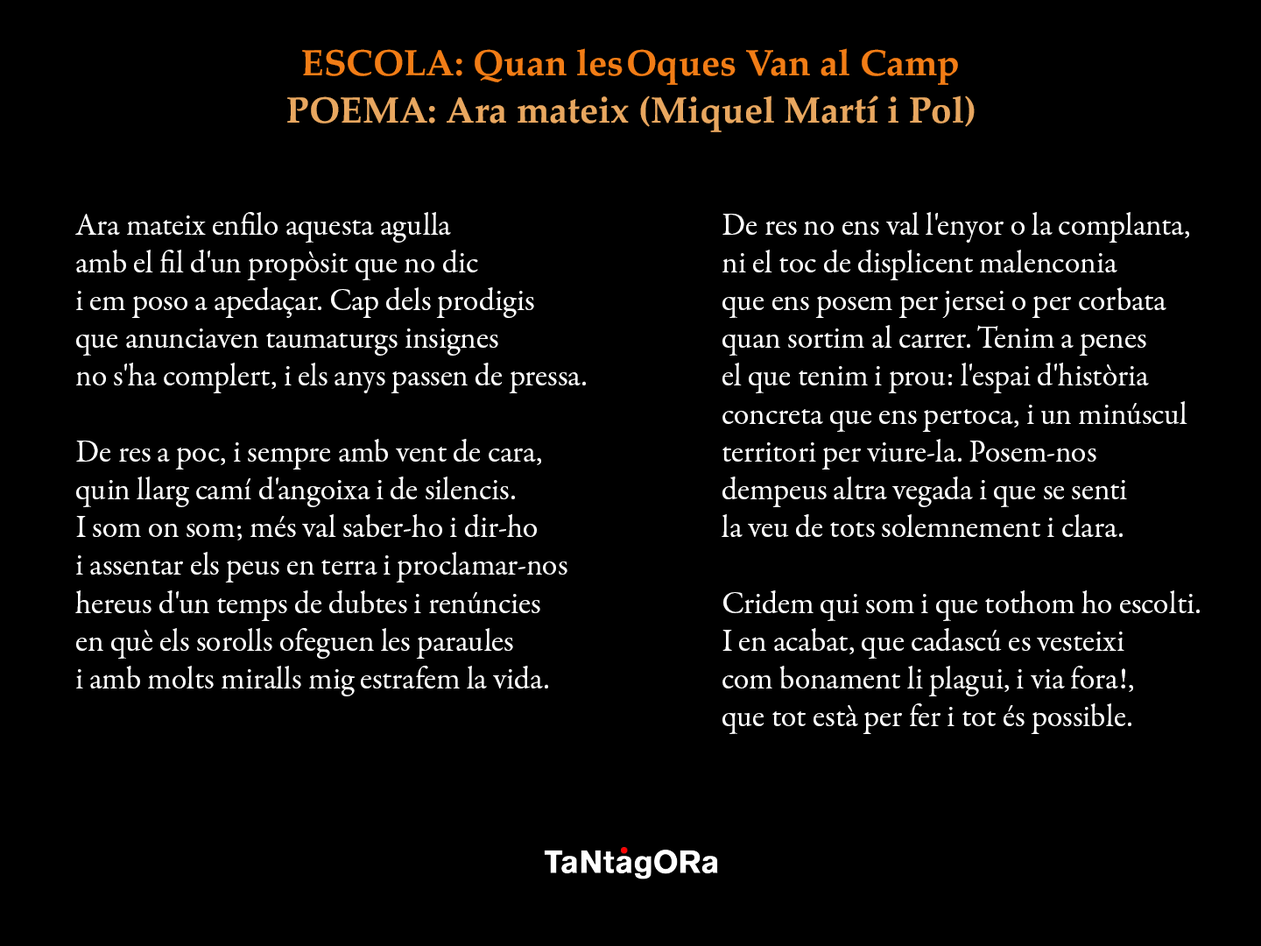
<style>
.page{position:relative;width:1261px;height:946px;background:#000000}
.page>*{position:absolute;margin:0}
.t1{font:36.8px "Palatino-Bold";color:#f27d16}
.t2{font:36.8px "Palatino-Bold";color:#e8a760}
.t3{font:31.5px "GaramondPremrPro";color:#ffffff}
</style>
<div class="page">
<p class="t1" style="left:302px;top:48px;width:656px;height:37px">ESCOLA: Quan les Oques Van al Camp</p>
<p class="t2" style="left:287px;top:95px;width:688px;height:37px">POEMA: Ara mateix (Miquel Martí i Pol)</p>
<p class="t3" style="left:75px;top:212px;width:511px;height:484px">Ara mateix enfilo aquesta agulla<br>amb el fil d'un propòsit que no dic<br>i em poso a apedaçar. Cap dels prodigis<br>que anunciaven taumaturgs insignes<br>no s'ha complert, i els anys passen de pressa.<br><br>De res a poc, i sempre amb vent de cara,<br>quin llarg camí d'angoixa i de silencis.<br>I som on som; més val saber-ho i dir-ho<br>i assentar els peus en terra i proclamar-nos<br>hereus d'un temps de dubtes i renúncies<br>en què els sorolls ofeguen les paraules<br>i amb molts miralls mig estrafem la vida.</p>
<p class="t3" style="left:722px;top:212px;width:478px;height:522px">De res no ens val l'enyor o la complanta,<br>ni el toc de displicent malenconia<br>que ens posem per jersei o per corbata<br>quan sortim al carrer. Tenim a penes<br>el que tenim i prou: l'espai d'història<br>concreta que ens pertoca, i un minúscul<br>territori per viure-la. Posem-nos<br>dempeus altra vegada i que se senti<br>la veu de tots solemnement i clara.<br><br>Cridem qui som i que tothom ho escolti.<br>I en acabat, que cadascú es vesteixi<br>com bonament li plagui, i via fora!,<br>que tot està per fer i tot és possible.</p>
</div>
